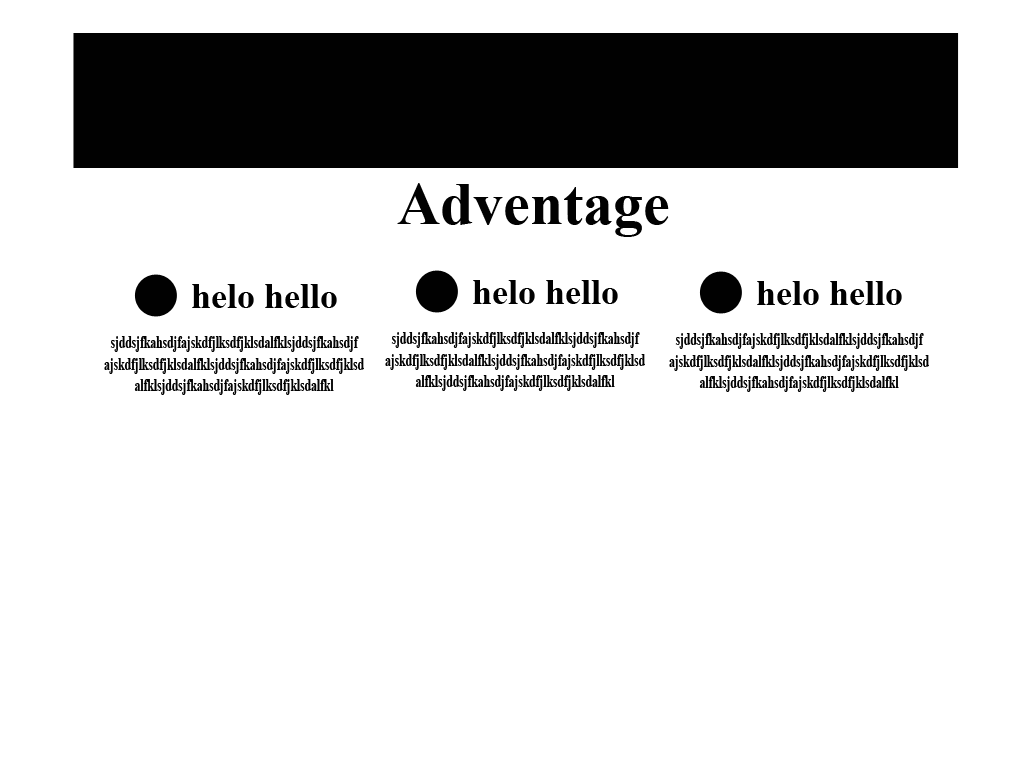
<style>
.page{position:relative;width:1024px;height:768px;background:#ffffff}
.page>*{position:absolute;margin:0}
.t1{font:60px "TimesNewRomanPS-BoldMT";color:#010101}
.t2{font:36px "TimesNewRomanPS-BoldMT";color:#010101}
.t3{font:18px "TimesNewRomanPS-BoldMT";color:#010101;scale:0.64 1}
</style>
<div class="page">
<p class="t1" style="left:397px;top:183px;width:272px;height:54px">Adventage</p>
<p class="t2" style="left:473px;top:280px;width:145px;height:24px">helo hello</p>
<p class="t2" style="left:757px;top:281px;width:145px;height:24px">helo hello</p>
<p class="t2" style="left:192px;top:284px;width:145px;height:24px">helo hello</p>
<p class="t3" style="left:104px;top:336px;width:260px;height:59px;text-align:center">sjddsjfkahsdjfajskdfjlksdfjklsdalfklsjddsjfkahsdjf<br>ajskdfjlksdfjklsdalfklsjddsjfkahsdjfajskdfjlksdfjklsd<br>alfklsjddsjfkahsdjfajskdfjlksdfjklsdalfkl</p>
<p class="t3" style="left:385px;top:332px;width:260px;height:59px;text-align:center">sjddsjfkahsdjfajskdfjlksdfjklsdalfklsjddsjfkahsdjf<br>ajskdfjlksdfjklsdalfklsjddsjfkahsdjfajskdfjlksdfjklsd<br>alfklsjddsjfkahsdjfajskdfjlksdfjklsdalfkl</p>
<p class="t3" style="left:669px;top:333px;width:260px;height:59px;text-align:center">sjddsjfkahsdjfajskdfjlksdfjklsdalfklsjddsjfkahsdjf<br>ajskdfjlksdfjklsdalfklsjddsjfkahsdjfajskdfjlksdfjklsd<br>alfklsjddsjfkahsdjfajskdfjlksdfjklsdalfkl</p>
</div>
